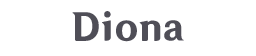
<style>
.page{position:relative;width:256px;height:56px;background:#ffffff}
.page>*{position:absolute;margin:0}
.t1{font:36px "HYWenHei-HEW";color:#4f4e57}
</style>
<div class="page">
<p class="t1" style="left:72px;top:11px;width:112px;height:31px">Diona</p>
</div>
